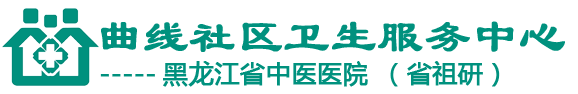
<style>
.page{position:relative;width:578px;height:94px;background:#ffffff}
.page>*{position:absolute;margin:0}
.t1{font:45.8px "LiSu";color:#00917e;font-weight:bold}
.t2{font:25px "MicrosoftYaHei";color:#00917e;font-weight:bold}
</style>
<div class="page">
<p class="t1" style="left:101px;top:21px;width:464px;height:31px">曲线社区卫生服务中心</p>
<p class="t2" style="left:100px;top:61px;width:400px;height:26px">-----黑龙江省中医医院（省祖研）</p>
</div>
